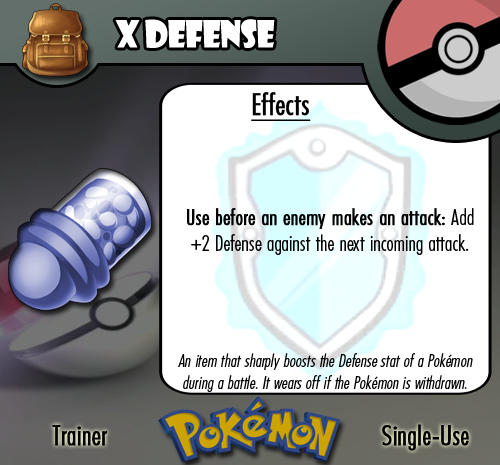
<style>
.page{position:relative;width:500px;height:465px}
.page>*{position:absolute;margin:0}
.t1{font:36.7px "ShowcardGothic-Reg";letter-spacing:-0.025em;color:#ffffff;scale:0.91 1}
.t2{font:22.2px "FuturaCondensedBQ-Light";color:#010101}
.t3{font:27.8px "FuturaCondensedBQ-Light";color:#010101;font-weight:bold}
.t4{font:30.6px "FuturaCondensedBQ-Light";color:#010101;font-weight:bold;text-decoration:underline}
.t5{font:22.2px "FuturaCondensedBQ-Light";color:#010101;font-weight:bold}
.t6{font:18.1px "FuturaCondensedBQ-Light";color:#010101;font-style:italic}
</style>
<div class="page">
<p class="t1" style="left:115px;top:19px;width:160px;height:29px">X Defense</p>
<p class="t2" style="left:187px;top:92px;width:287px;height:163px"><span class="t3">  </span><span class="t4">Effects<br><br><br><br><br><br><br></span><span class="t5">Use before an enemy makes an attack: </span>Add +2 Defense against the next incoming attack.</p>
<p class="t6" style="left:178px;top:353px;width:295px;height:39px;text-align:center">An item that sharply boosts the Defense stat of a Pokémon during a battle. It wears off if the Pokémon is withdrawn.</p>
<p class="t3" style="left:52px;top:425px;width:55px;height:21px">Trainer</p>
<p class="t3" style="left:382px;top:424px;width:87px;height:27px">Single-Use</p>
</div>
